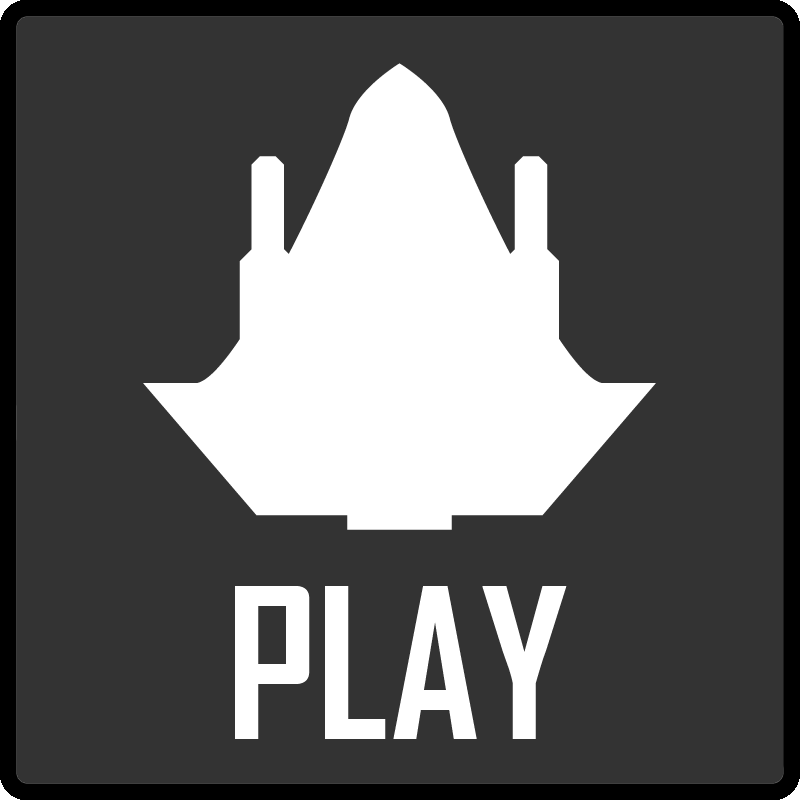
<style>
.page{position:relative;width:800px;height:800px;background:#333333}
.page>*{position:absolute;margin:0}
.t1{font:200px "AgencyFB-Bold";color:#ffffff}
</style>
<div class="page">
<p class="t1" style="left:235px;top:586px;width:332px;height:153px">PLAY</p>
</div>
